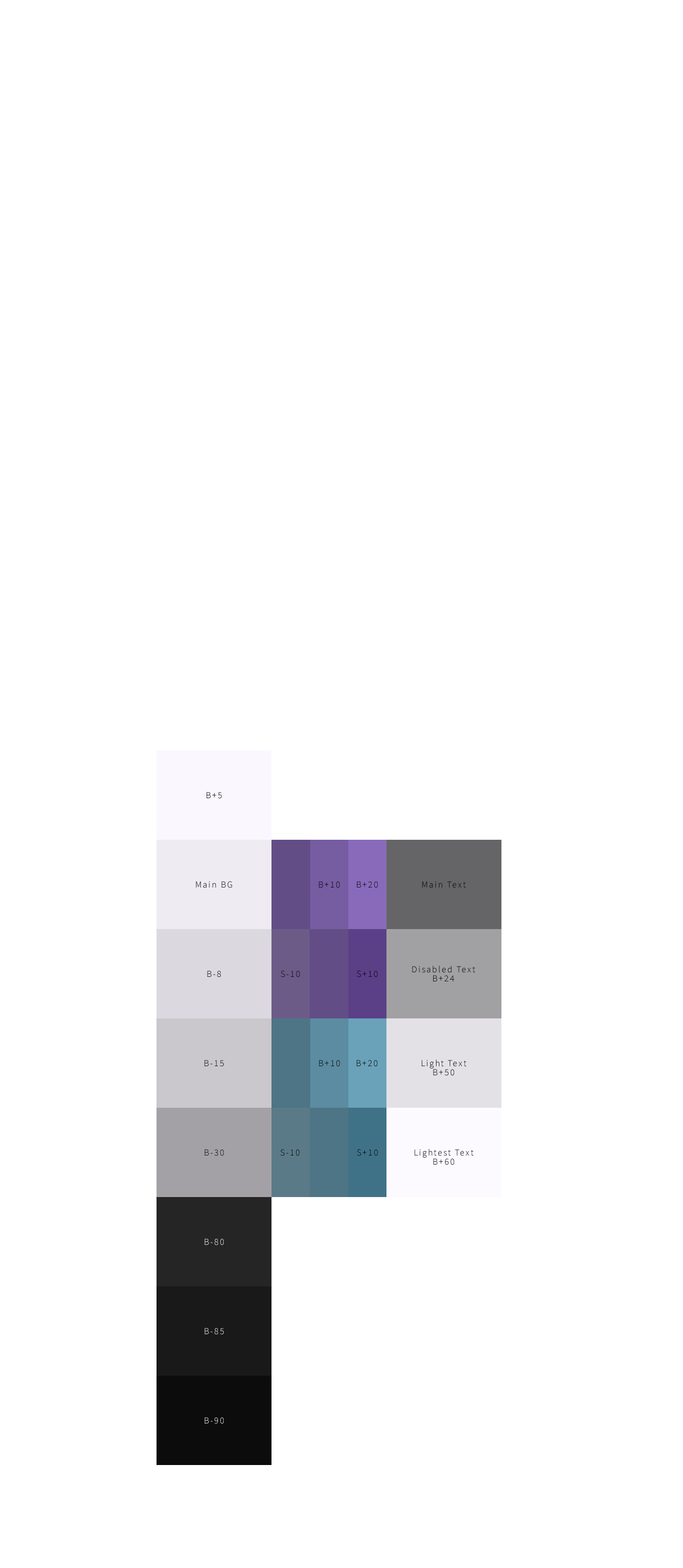
<style>
.page{position:relative;width:683px;height:1568px;background:#ffffff}
.page>*{position:absolute;margin:0}
.t1{font:9.1px "SourceSansPro-Light";letter-spacing:0.125em;color:#000000}
.t2{font:9.1px "SourceSansPro-Light";letter-spacing:0.125em}
.t3{font:9.1px/9.1px "SourceSansPro-Light";letter-spacing:0.125em;color:#000000}
.t4{font:9.1px/9.1px "SourceSansPro-Light";letter-spacing:0.125em}
</style>
<div class="page">
<p class="t1" style="left:207px;top:792px;width:15px;height:7px">B+5</p>
<p class="t2" style="left:196px;top:881px;width:36px;height:7px">Main BG</p>
<p class="t1" style="left:319px;top:881px;width:21px;height:7px">B+10</p>
<p class="t1" style="left:357px;top:881px;width:21px;height:7px">B+20</p>
<p class="t1" style="left:422px;top:881px;width:44px;height:7px">Main Text</p>
<p class="t3" style="left:412px;top:965px;width:63px;height:16px;text-align:center">Disabled Text<br>B+24</p>
<p class="t2" style="left:207px;top:971px;width:14px;height:6px">B-8</p>
<p class="t1" style="left:280px;top:971px;width:20px;height:6px">S-10</p>
<p class="t1" style="left:357px;top:971px;width:21px;height:6px">S+10</p>
<p class="t2" style="left:204px;top:1060px;width:20px;height:7px">B-15</p>
<p class="t1" style="left:319px;top:1060px;width:21px;height:7px">B+10</p>
<p class="t2" style="left:356px;top:1060px;width:22px;height:7px">B+20</p>
<p class="t4" style="left:422px;top:1059px;width:45px;height:17px;text-align:center">Light Text<br>B+50</p>
<p class="t1" style="left:204px;top:1149px;width:20px;height:7px">B-30</p>
<p class="t1" style="left:280px;top:1149px;width:20px;height:7px">S-10</p>
<p class="t1" style="left:357px;top:1149px;width:21px;height:7px">S+10</p>
<p class="t4" style="left:414px;top:1149px;width:59px;height:16px;text-align:center">Lightest Text<br>B+60</p>
<p class="t2" style="left:204px;top:1239px;width:20px;height:6px">B-80</p>
<p class="t2" style="left:204px;top:1328px;width:20px;height:7px">B-85</p>
<p class="t2" style="left:204px;top:1417px;width:20px;height:7px">B-90</p>
</div>
